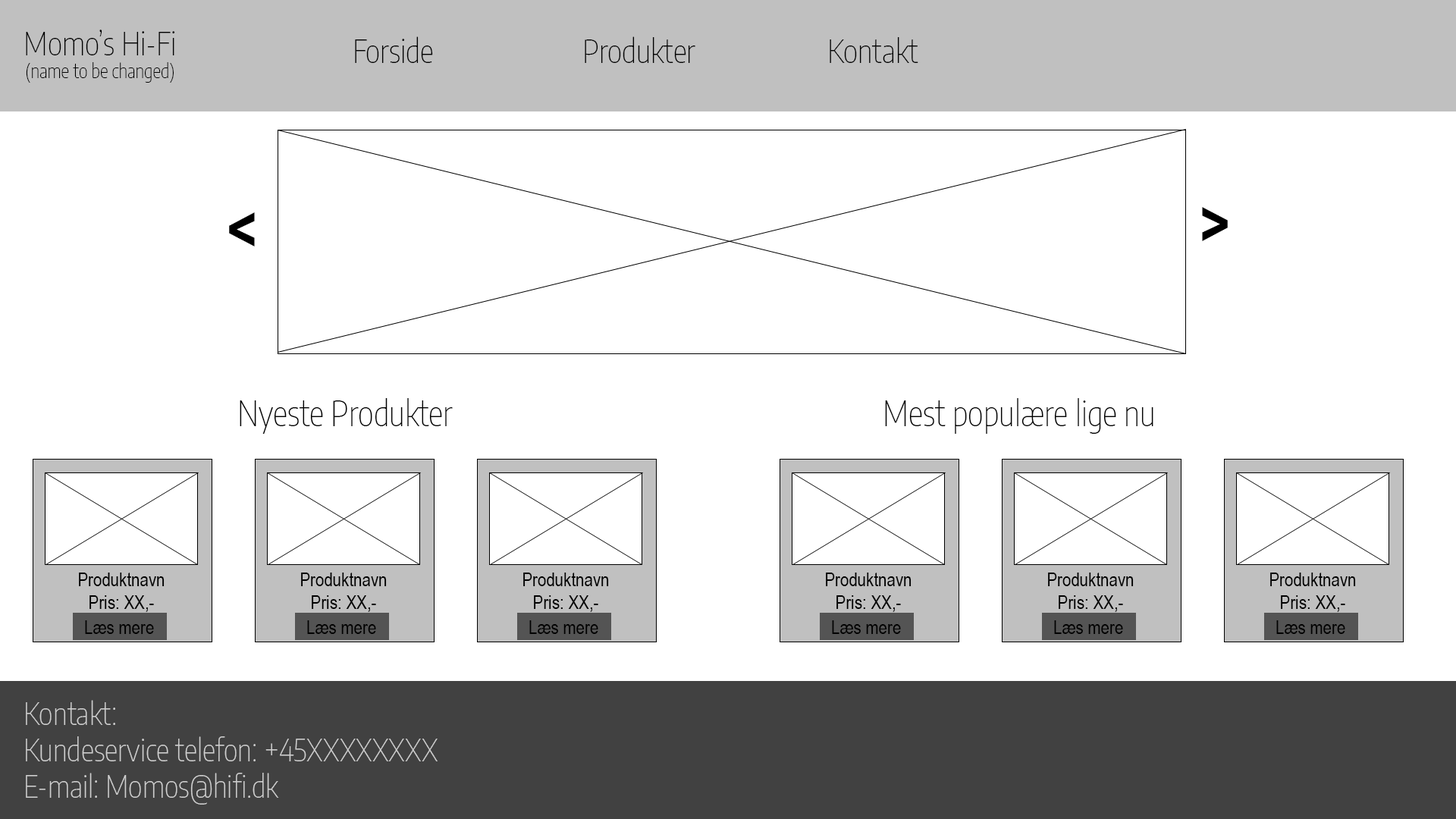
<style>
.page{position:relative;width:1456px;height:819px;background:#ffffff}
.page>*{position:absolute;margin:0}
.t1{font:19px "EncodeSansCondensed-Thin";color:#000000}
.t2{font:31.6px "EncodeSansCondensed-Thin";color:#000000}
.t3{font:63.2px "ArialNarrow-Bold";color:#000000}
.t4{font:34px "EncodeSansCondensed-Thin";color:#000000}
.t5{font:19px "ArialNarrow";color:#000000}
.t6{font:30.5px "EncodeSansCondensed-Thin";color:#cfcfcf}
</style>
<div class="page">
<p class="t1" style="left:26px;top:30px;width:149px;height:53px;text-align:center"><span class="t2">Momo’s Hi-Fi<br></span>(name to be changed)</p>
<p class="t2" style="left:355px;top:36px;width:78px;height:27px">Forside</p>
<p class="t2" style="left:585px;top:36px;width:110px;height:27px">Produkter</p>
<p class="t2" style="left:830px;top:37px;width:88px;height:26px">Kontakt</p>
<p class="t3" style="left:1202px;top:207px;width:26px;height:34px;rotate:180deg">&lt;</p>
<p class="t3" style="left:229px;top:212px;width:26px;height:34px">&lt;</p>
<p class="t4" style="left:240px;top:398px;width:213px;height:36px">Nyeste Produkter</p>
<p class="t4" style="left:885px;top:398px;width:268px;height:36px">Mest populære lige nu</p>
<p class="t5" style="left:79px;top:573px;width:86px;height:39px;text-align:center">Produktnavn<br>Pris: XX,-</p>
<p class="t5" style="left:301px;top:573px;width:86px;height:39px;text-align:center">Produktnavn<br>Pris: XX,-</p>
<p class="t5" style="left:523px;top:573px;width:86px;height:39px;text-align:center">Produktnavn<br>Pris: XX,-</p>
<p class="t5" style="left:826px;top:573px;width:86px;height:39px;text-align:center">Produktnavn<br>Pris: XX,-</p>
<p class="t5" style="left:1048px;top:573px;width:86px;height:39px;text-align:center">Produktnavn<br>Pris: XX,-</p>
<p class="t5" style="left:1270px;top:573px;width:86px;height:39px;text-align:center">Produktnavn<br>Pris: XX,-</p>
<p class="t5" style="left:85px;top:620px;width:69px;height:14px">Læs mere</p>
<p class="t5" style="left:307px;top:620px;width:69px;height:14px">Læs mere</p>
<p class="t5" style="left:529px;top:620px;width:69px;height:14px">Læs mere</p>
<p class="t5" style="left:832px;top:620px;width:69px;height:14px">Læs mere</p>
<p class="t5" style="left:1054px;top:620px;width:69px;height:14px">Læs mere</p>
<p class="t5" style="left:1276px;top:620px;width:69px;height:14px">Læs mere</p>
<p class="t6" style="left:26px;top:700px;width:412px;height:105px">Kontakt: <br>Kundeservice telefon: +45XXXXXXXX<br>E-mail: Momos@hifi.dk</p>
</div>
